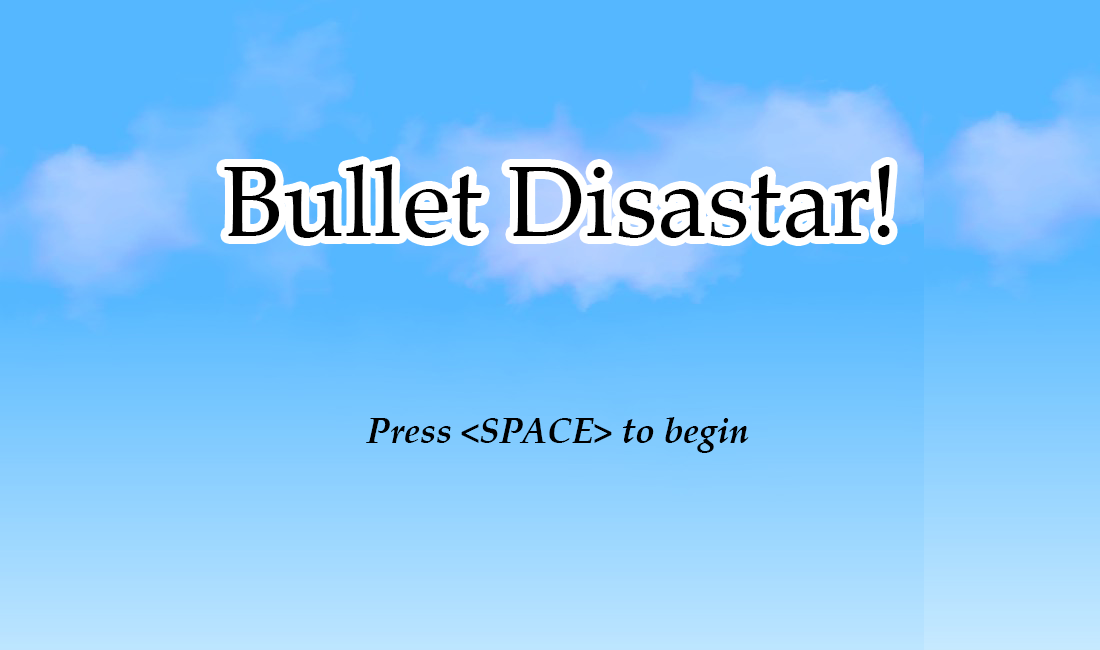
<style>
.page{position:relative;width:1100px;height:650px}
.page>*{position:absolute;margin:0}
.t1{font:100px "PalatinoLinotype-Roman";color:#000000}
.t2{font:36px "PalatinoLinotype-BoldItalic";color:#000000}
</style>
<div class="page">
<p class="t1" style="left:224px;top:164px;width:666px;height:74px">Bullet Disastar!</p>
<p class="t2" style="left:366px;top:417px;width:383px;height:36px">Press &lt;SPACE&gt; to begin</p>
</div>
